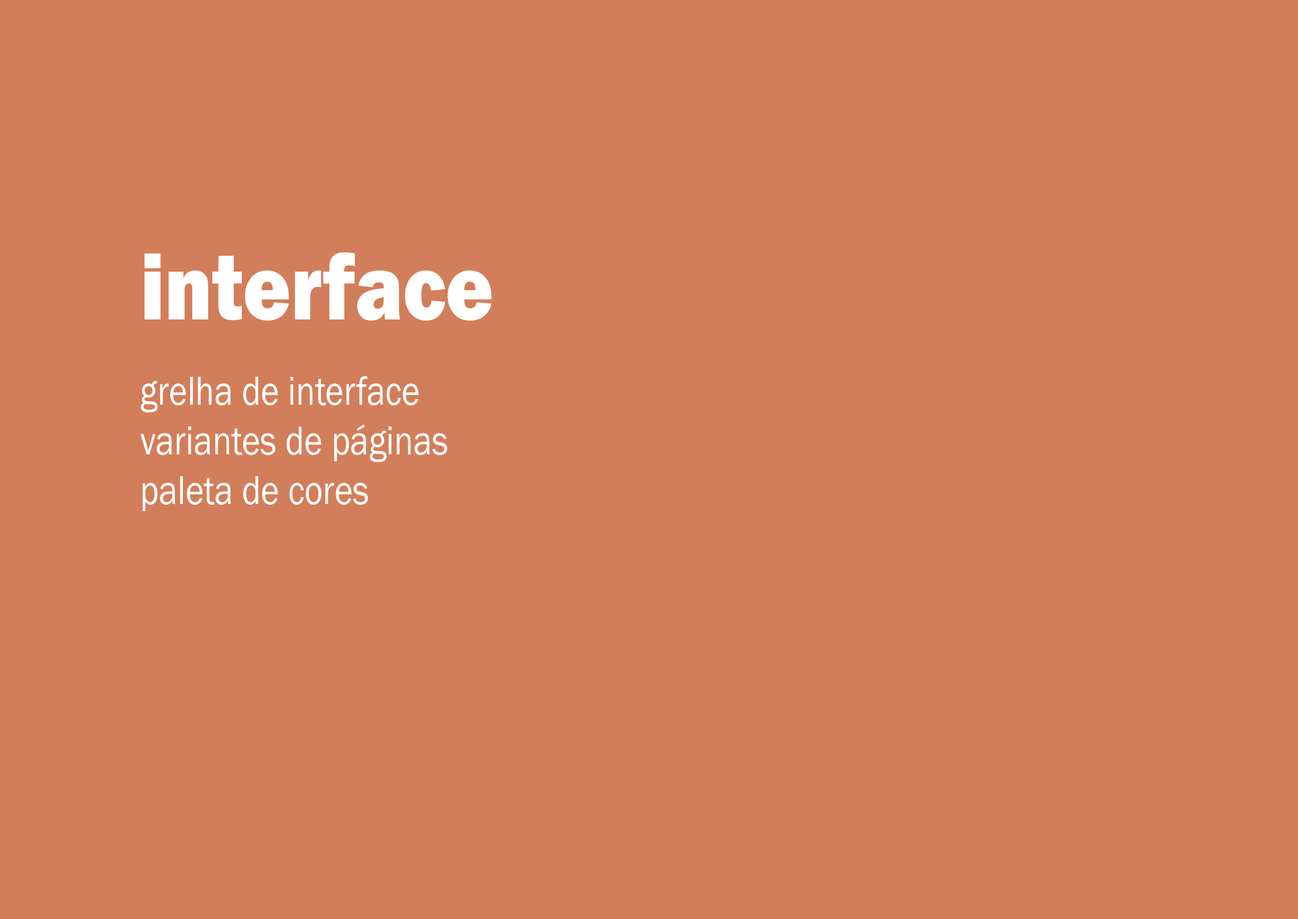
<style>
.page{position:relative;width:1298px;height:919px;background:#d37e5a}
.page>*{position:absolute;margin:0}
.t1{font:95.8px "FranklinGothic-Heavy";color:#ffffff;scale:0.85 1}
.t2{font:41.4px "FranklinGothic-Book";color:#ffffff;scale:0.85 1}
</style>
<div class="page">
<p class="t1" style="left:144px;top:252px;width:348px;height:68px">interface</p>
<p class="t2" style="left:140px;top:376px;width:307px;height:135px">grelha de interface<br>variantes de páginas<br>paleta de cores</p>
</div>
